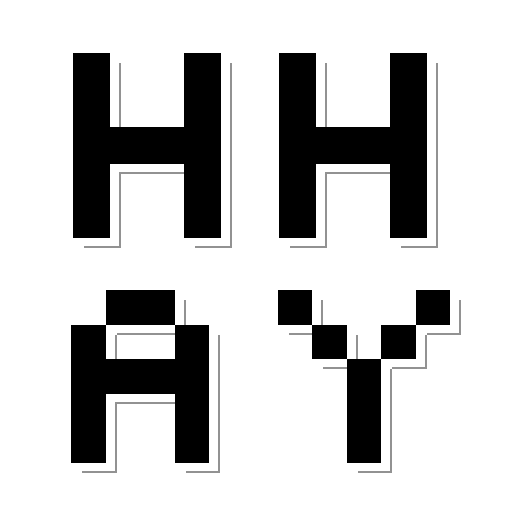
<style>
.page{position:relative;width:512px;height:512px;background:#ffffff}
.page>*{position:absolute;margin:0}
.t1{font:310px/225.5px "Silkscreen";color:#000000}
.t2{font:289.9px/225.5px "Silkscreen";color:#000000}
.t3{font:310px/225.5px "Silkscreen"}
.t4{font:289.9px/225.5px "Silkscreen"}
</style>
<div class="page">
<p class="t1" style="left:71px;top:53px;width:379px;height:410px">HH<br><span class="t2">AY</span></p>
<p class="t1" style="left:80px;top:61px;width:379px;height:410px">HH<br><span class="t2">AY</span></p>
<p class="t3" style="left:82px;top:63px;width:379px;height:410px">HH<br><span class="t4">AY</span></p>
</div>
